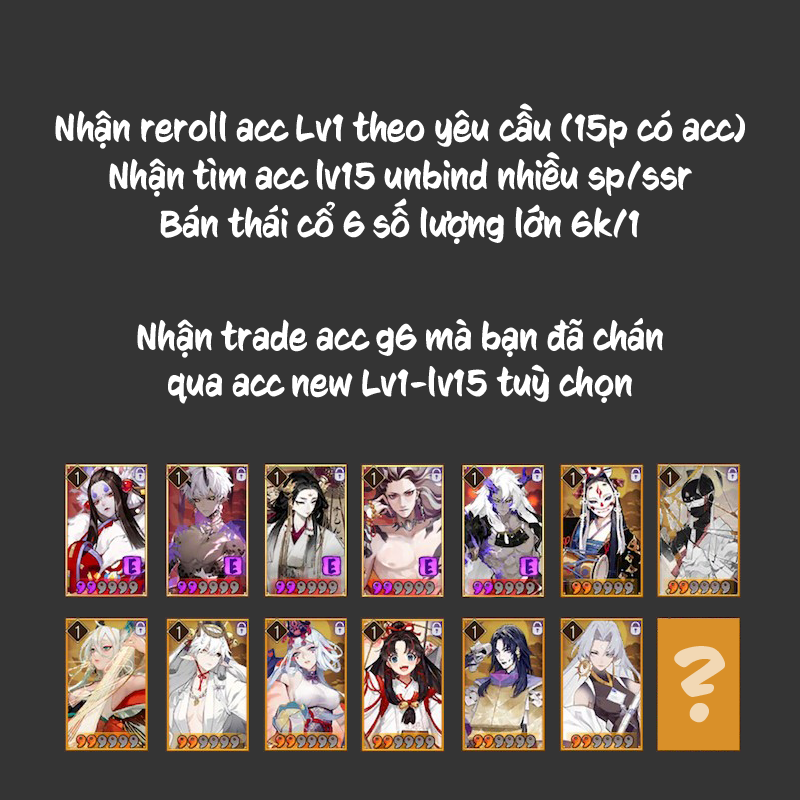
<style>
.page{position:relative;width:800px;height:800px;background:#343434}
.page>*{position:absolute;margin:0}
.t1{font:38px/48px "000SignLanguageTB";color:#ffffff}
.t2{font:38px "000SignLanguageTB";color:#ffffff}
.t3{font:100px "000SignLanguageTB";color:#f2d8b4}
</style>
<div class="page">
<p class="t1" style="left:55px;top:103px;width:690px;height:141px;text-align:center">Nhận reroll acc Lv1 theo yêu cầu (15p có acc)<br>Nhận tìm acc lv15 unbind nhiều sp/ssr<br>Bán thái cổ 6 số lượng lớn 6k/1</p>
<p class="t2" style="left:137px;top:318px;width:526px;height:86px;text-align:center">Nhận trade acc g6 mà bạn đã chán<br>qua acc new Lv1-lv15 tuỳ chọn</p>
<p class="t3" style="left:674px;top:646px;width:51px;height:77px">?</p>
</div>
